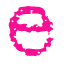
<style>
.page{position:relative;width:64px;height:64px;background:#ffffff}
.page>*{position:absolute;margin:0}
.t1{font:100px "Harting-Plain";letter-spacing:-0.025em;color:#f80e92}
</style>
<div class="page">
<p class="t1" style="left:8px;top:6px;width:46px;height:51px">e</p>
</div>
